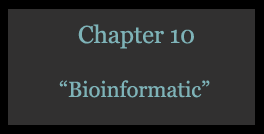
<style>
.page{position:relative;width:264px;height:134px;background:#313030}
.page>*{position:absolute;margin:0}
.t1{font:24.5px "Georgia";letter-spacing:-0.005em;color:#7eb3b8}
.t2{font:22px "Georgia";letter-spacing:-0.005em;color:#7eb3b8}
</style>
<div class="page">
<p class="t1" style="left:78px;top:24px;width:116px;height:25px">Chapter 10</p>
<p class="t2" style="left:59px;top:80px;width:151px;height:18px">“Bioinformatic”</p>
</div>
